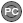
<style>
.page{position:relative;width:23px;height:23px;background:#ffffff}
.page>*{position:absolute;margin:0}
.t1{font:10.5px "ArialMT";color:#fefefe}
</style>
<div class="page">
<p class="t1" style="left:5px;top:8px;width:14px;height:7px">PC</p>
</div>
